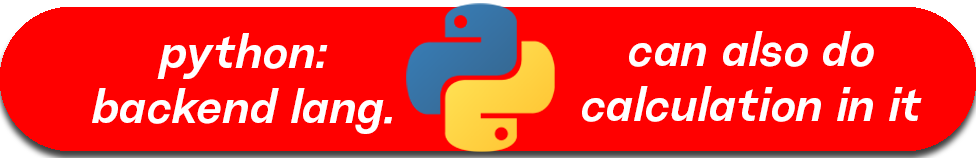
<style>
.page{position:relative;width:976px;height:158px;background:#ff0000}
.page>*{position:absolute;margin:0}
.t1{font:45.8px "ResistSansDisplay-MediumOblique";letter-spacing:0.02em;color:#ffffff}
</style>
<div class="page">
<p class="t1" style="left:92px;top:33px;width:300px;height:101px;text-align:center">python:<br>backend lang.</p>
<p class="t1" style="left:582px;top:31px;width:340px;height:91px;text-align:center">can also do<br>calculation in it</p>
</div>
